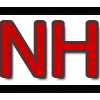
<style>
.page{position:relative;width:100px;height:100px;background:#ffffff}
.page>*{position:absolute;margin:0}
.t1{font:72px "Helvetica";color:#cf0000}
</style>
<div class="page">
<p class="t1" style="left:2px;top:23px;width:94px;height:52px">NH</p>
</div>
